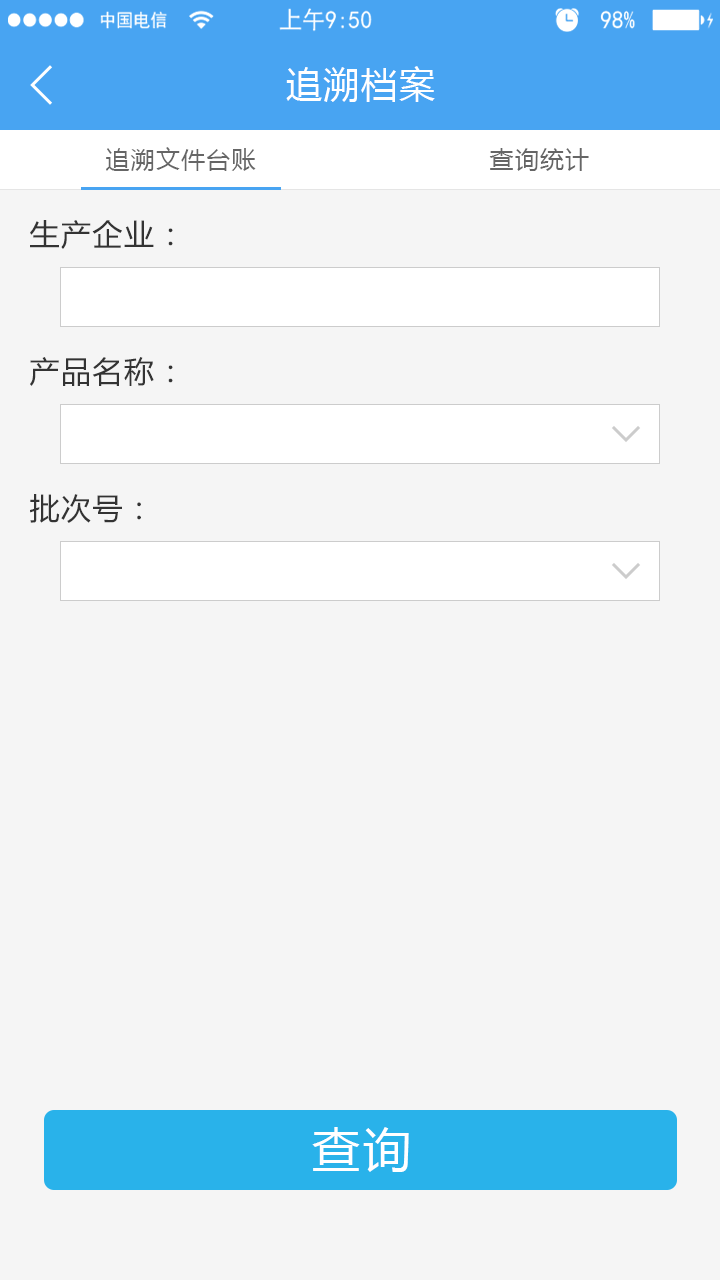
<style>
.page{position:relative;width:720px;height:1280px;background:#f5f5f5}
.page>*{position:absolute;margin:0}
.t1{font:36px "MicrosoftYaHei";letter-spacing:0.05em;color:#ffffff}
.t2{font:24px "MicrosoftYaHei";letter-spacing:0.05em;color:#666666}
.t3{font:30px "MicrosoftYaHei";letter-spacing:0.05em;color:#333333}
.t4{font:48px "MicrosoftYaHei";letter-spacing:0.05em;color:#ffffff}
</style>
<div class="page">
<p class="t1" style="left:286px;top:66px;width:149px;height:36px">追溯档案</p>
<p class="t2" style="left:106px;top:147px;width:150px;height:24px">追溯文件台账</p>
<p class="t2" style="left:489px;top:148px;width:100px;height:23px">查询统计</p>
<p class="t3" style="left:30px;top:220px;width:143px;height:29px">生产企业：</p>
<p class="t3" style="left:30px;top:357px;width:143px;height:29px">产品名称：</p>
<p class="t3" style="left:30px;top:494px;width:111px;height:29px">批次号：</p>
<p class="t4" style="left:312px;top:1127px;width:97px;height:45px">查询</p>
</div>
